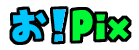
<style>
.page{position:relative;width:139px;height:50px;background:#ffffff}
.page>*{position:absolute;margin:0}
.t1{font:36px "KFhimajiKIDS";color:#00c6ff}
.t2{font:36px "KFhimajiKIDS";color:#00f835}
</style>
<div class="page">
<p class="t1" style="left:12px;top:9px;width:35px;height:33px">お</p>
<p class="t1" style="left:53px;top:9px;width:13px;height:33px">！</p>
<p class="t2" style="left:72px;top:10px;width:57px;height:31px">Pix</p>
</div>
